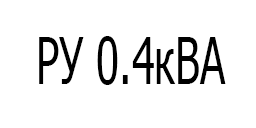
<style>
.page{position:relative;width:256px;height:128px;background:#ffffff}
.page>*{position:absolute;margin:0}
.t1{font:64.9px "Tahoma";color:#000000;scale:0.64 1}
</style>
<div class="page">
<p class="t1" style="left:39px;top:36px;width:187px;height:49px">РУ 0.4кВА</p>
</div>
